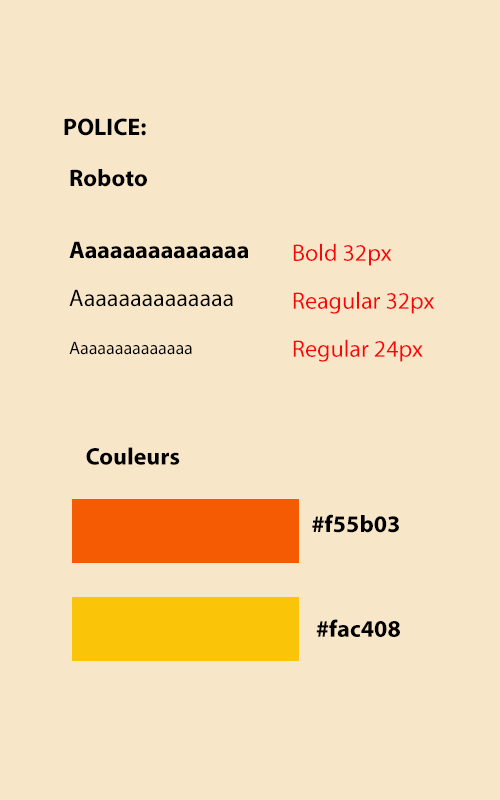
<style>
.page{position:relative;width:500px;height:800px;background:#f7e6c8}
.page>*{position:absolute;margin:0}
.t1{font:24px "MyriadPro-Bold";color:#000000}
.t2{font:24px/24px "MyriadPro-Bold";color:#000000}
.t3{font:24px/24px "MyriadPro-Regular";color:#000000}
.t4{font:18px/24px "MyriadPro-Regular";color:#000000}
.t5{font:24px/24px "MyriadPro-Regular";color:#f90707}
</style>
<div class="page">
<p class="t1" style="left:64px;top:118px;width:82px;height:18px">POLICE:</p>
<p class="t2" style="left:69px;top:169px;width:180px;height:186px">Roboto<br><br><br>Aaaaaaaaaaaaaa<br><br><span class="t3">Aaaaaaaaaaaaaa<br><br></span><span class="t4">Aaaaaaaaaaaaaa</span></p>
<p class="t5" style="left:293px;top:243px;width:142px;height:119px">Bold 32px<br><br>Reagular 32px<br><br>Regular 24px</p>
<p class="t1" style="left:86px;top:447px;width:94px;height:18px">Couleurs</p>
<p class="t1" style="left:312px;top:514px;width:87px;height:19px">#f55b03</p>
<p class="t1" style="left:316px;top:619px;width:84px;height:18px">#fac408</p>
</div>
